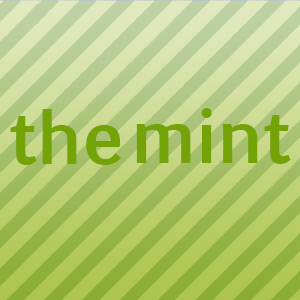
<style>
.page{position:relative;width:300px;height:300px}
.page>*{position:absolute;margin:0}
.t1{font:72px "EuphemiaUCAS-Bold";color:#73a307}
</style>
<div class="page">
<p class="t1" style="left:10px;top:109px;width:111px;height:56px">the</p>
<p class="t1" style="left:136px;top:108px;width:155px;height:56px">mint</p>
</div>
